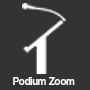
<style>
.page{position:relative;width:90px;height:90px;background:#333333}
.page>*{position:absolute;margin:0}
.t1{font:11px "CoolveticaRg-Regular";color:#ffffff}
</style>
<div class="page">
<p class="t1" style="left:13px;top:77px;width:62px;height:8px">Podium Zoom</p>
</div>
